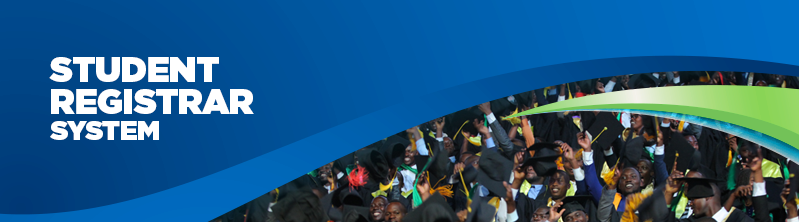
<style>
.page{position:relative;width:799px;height:222px}
.page>*{position:absolute;margin:0}
.t1{font:34.6px/31.1px "Gotham-Ultra";letter-spacing:-0.01em;color:#ffffff;text-transform:uppercase}
.t2{font:26.6px/31.1px "Gotham-Ultra";letter-spacing:-0.01em;color:#ffffff;text-transform:uppercase}
</style>
<div class="page">
<p class="t1" style="left:49px;top:57px;width:205px;height:83px">student<br>registrar<br><span class="t2">system</span></p>
</div>
